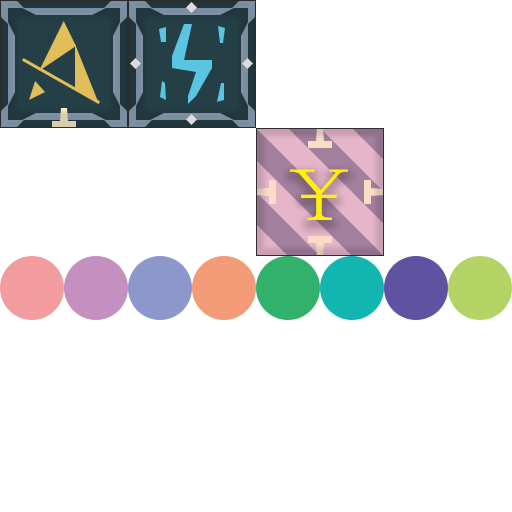
<style>
.page{position:relative;width:512px;height:512px;background:#ffffff}
.page>*{position:absolute;margin:0}
.t1{font:72px "SimSun";letter-spacing:-0.05em;color:#fff100}
</style>
<div class="page">
<p class="t1" style="left:290px;top:169px;width:58px;height:51px">￥</p>
</div>
